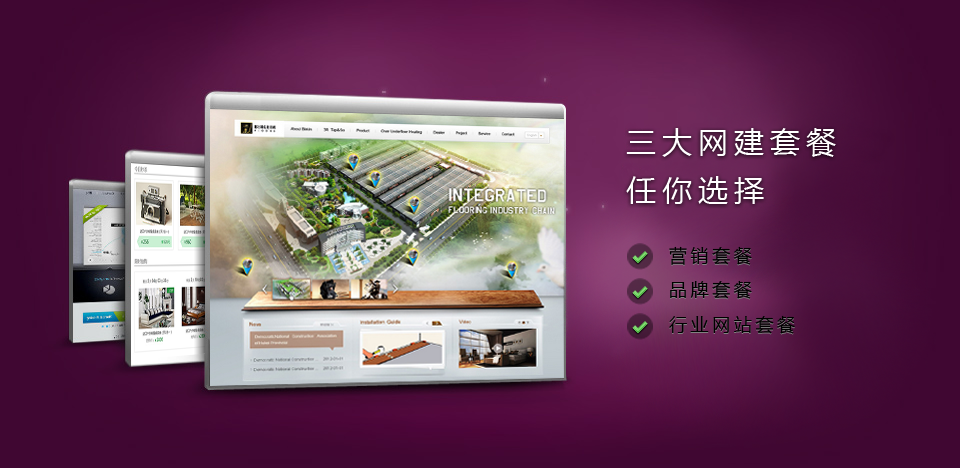
<style>
.page{position:relative;width:960px;height:468px}
.page>*{position:absolute;margin:0}
.t1{font:30px/48px "MicrosoftYaHei";letter-spacing:0.2em;color:#ffffff}
.t2{font:18px "MicrosoftYaHei";letter-spacing:0.2em;color:#000000}
.t3{font:18px "MicrosoftYaHei";letter-spacing:0.2em}
</style>
<div class="page">
<p class="t1" style="left:626px;top:128px;width:210px;height:76px;text-align:justify">三大网建套餐<br>任你选择</p>
<p class="t2" style="left:669px;top:246px;width:83px;height:19px">营销套餐</p>
<p class="t3" style="left:669px;top:247px;width:83px;height:19px">营销套餐</p>
<p class="t3" style="left:670px;top:281px;width:82px;height:19px">品牌套餐</p>
<p class="t2" style="left:670px;top:280px;width:82px;height:19px">品牌套餐</p>
<p class="t2" style="left:669px;top:315px;width:126px;height:19px">行业网站套餐</p>
</div>
